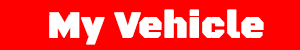
<style>
.page{position:relative;width:300px;height:50px;background:#ff0000}
.page>*{position:absolute;margin:0}
.t1{font:37.8px "BlackOpsOne-Regular";color:#ffffff;font-weight:bold}
</style>
<div class="page">
<p class="t1" style="left:49px;top:9px;width:215px;height:36px">My Vehicle</p>
</div>
